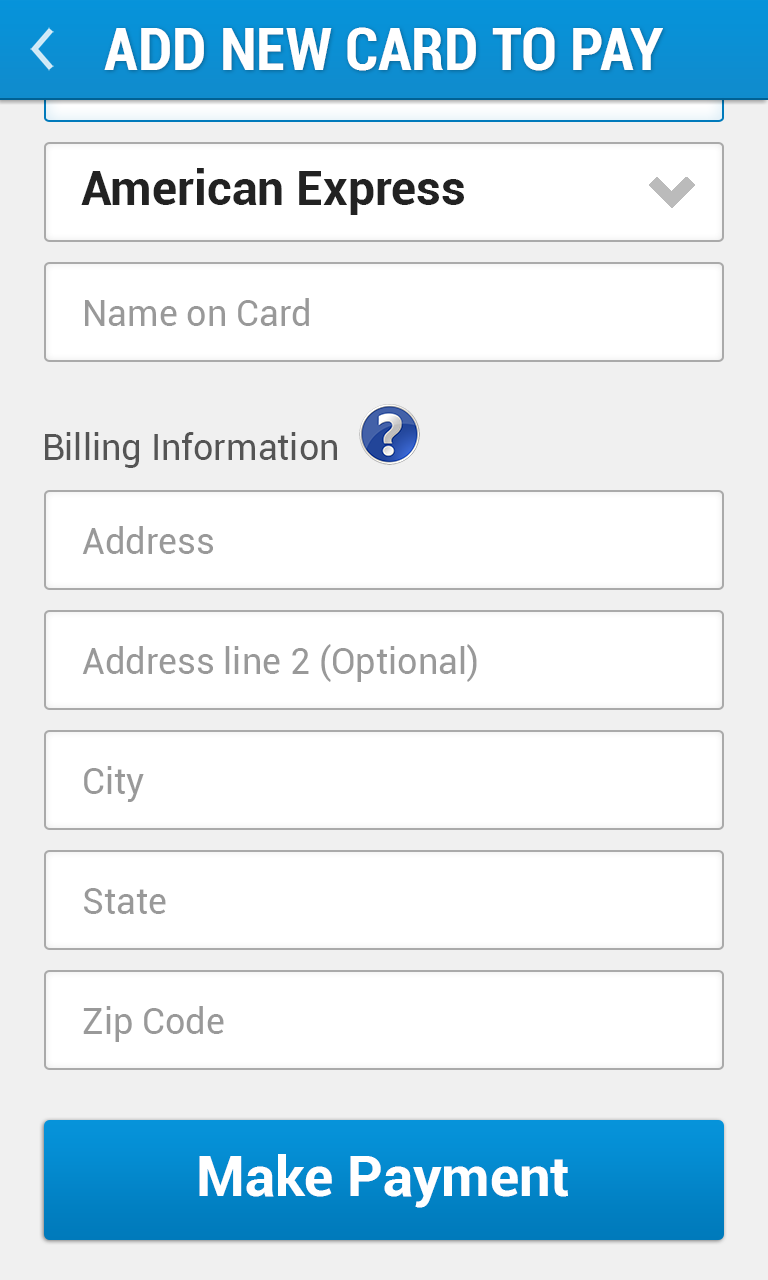
<style>
.page{position:relative;width:768px;height:1280px;background:#ffffff}
.page>*{position:absolute;margin:0}
.t1{font:60px "Roboto-BoldCondensed";color:#ffffff}
.t2{font:48px "Roboto-Bold";color:#222222}
.t3{font:36px "Roboto-Regular";color:#999999}
.t4{font:36px "Roboto-Regular";color:#555555}
.t5{font:56px "Roboto-Bold";color:#ffffff}
</style>
<div class="page">
<p class="t1" style="left:104px;top:27px;width:559px;height:44px">ADD NEW CARD TO PAY</p>
<p class="t2" style="left:81px;top:168px;width:383px;height:47px">American Express</p>
<p class="t3" style="left:85px;top:298px;width:224px;height:28px">Name on Card</p>
<p class="t4" style="left:45px;top:432px;width:292px;height:36px">Billing Information</p>
<p class="t3" style="left:82px;top:526px;width:131px;height:28px">Address</p>
<p class="t3" style="left:82px;top:644px;width:395px;height:38px">Address line 2 (Optional)</p>
<p class="t3" style="left:84px;top:766px;width:60px;height:36px">City</p>
<p class="t3" style="left:84px;top:888px;width:82px;height:26px">State</p>
<p class="t3" style="left:83px;top:1006px;width:141px;height:36px">Zip Code</p>
<p class="t5" style="left:199px;top:1154px;width:369px;height:54px">Make Payment</p>
</div>
